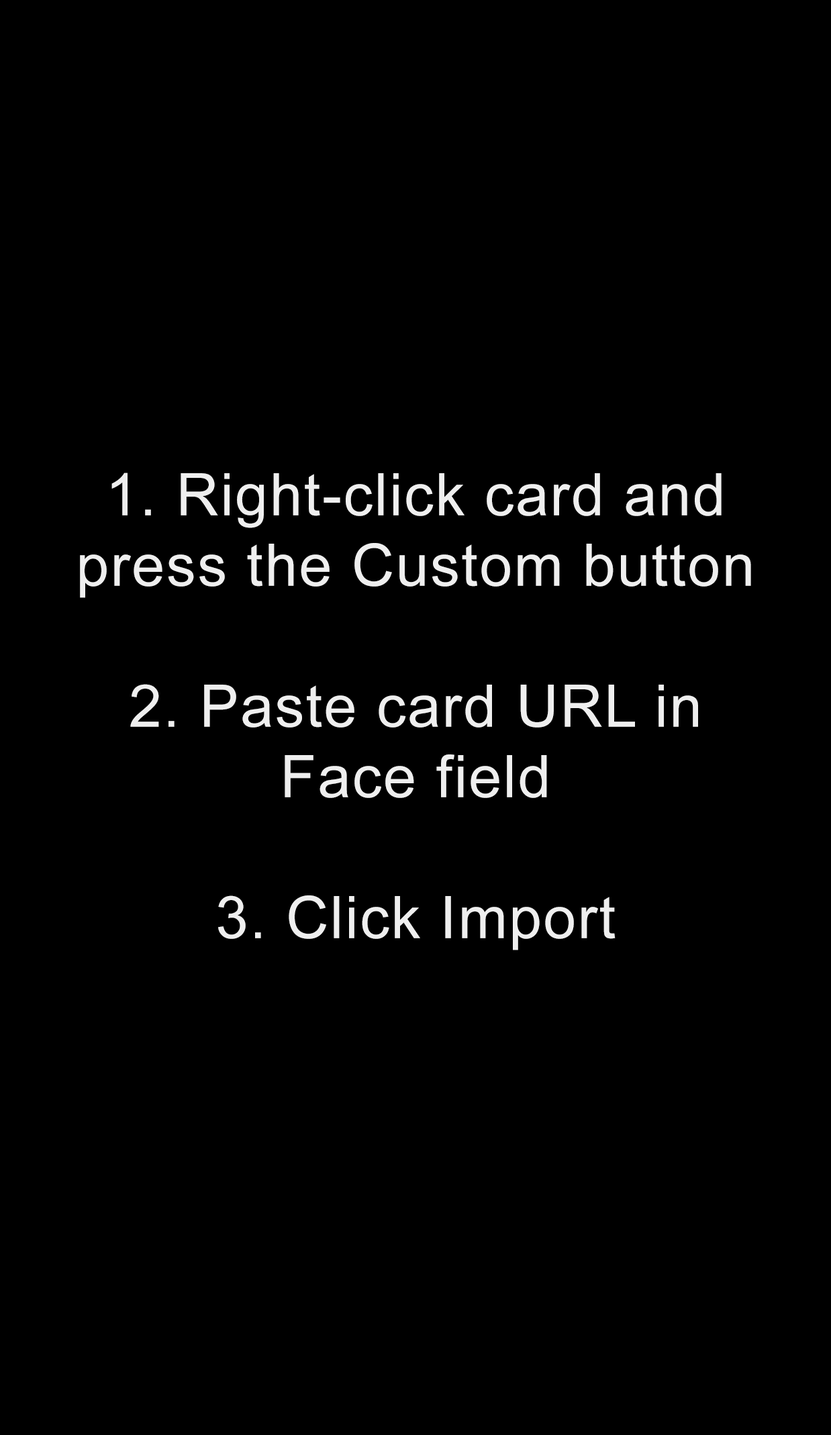
<style>
.page{position:relative;width:831px;height:1435px;background:#000000}
.page>*{position:absolute;margin:0}
.t1{font:58.7px "ArialMT";letter-spacing:0.03em;color:#efefef}
</style>
<div class="page">
<p class="t1" style="left:80px;top:473px;width:671px;height:477px;text-align:center">1. Right-click card and <br>press the Custom button<br><br>2. Paste card URL in <br>Face field  <br><br>3. Click Import</p>
</div>
